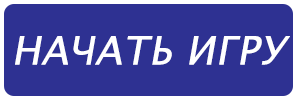
<style>
.page{position:relative;width:300px;height:100px;background:#2e3192}
.page>*{position:absolute;margin:0}
.t1{font:39px "LucidaSansUnicode";color:#ffffff;font-weight:bold;font-style:italic}
.t2{font:18px "Tahoma";color:#ffffff}
</style>
<div class="page">
<p class="t1" style="left:15px;top:36px;width:275px;height:29px"><span class="t2"><br></span>НАЧАТЬ ИГРУ</p>
</div>
